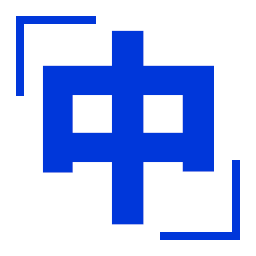
<style>
.page{position:relative;width:256px;height:256px;background:#ffffff}
.page>*{position:absolute;margin:0}
.t1{font:204px "SourceHanSansTC-Heavy";color:#0037da}
</style>
<div class="page">
<p class="t1" style="left:42px;top:30px;width:172px;height:195px">中</p>
</div>
